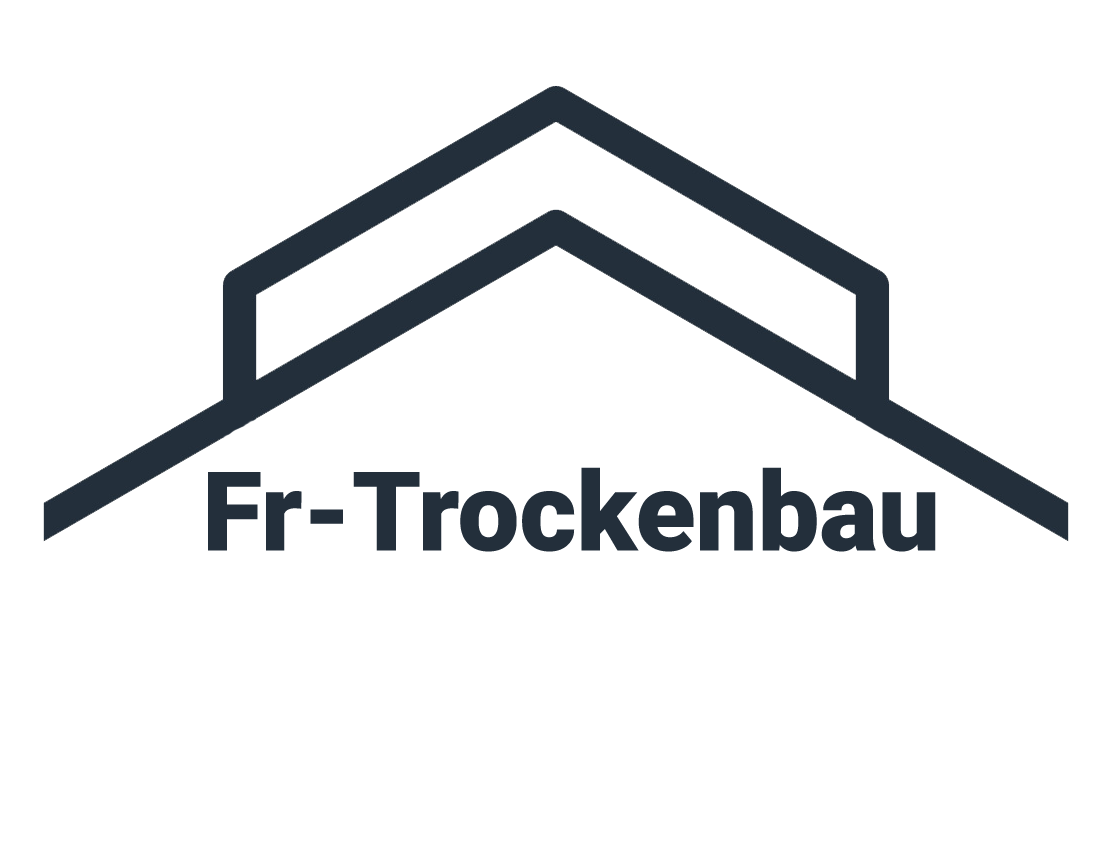
<style>
.page{position:relative;width:1106px;height:842px;background:#ffffff}
.page>*{position:absolute;margin:0}
.t1{font:110px "Roboto-Black";color:#232f3b}
</style>
<div class="page">
<p class="t1" style="left:208px;top:467px;width:728px;height:85px">Fr-Trockenbau</p>
</div>
